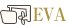
<style>
.page{position:relative;width:69px;height:27px;background:#ffffff}
.page>*{position:absolute;margin:0}
.t1{font:18px "RyuminPro-ExBold";letter-spacing:-0.08em;color:#ae9442;scale:0.9 1}
</style>
<div class="page">
<p class="t1" style="left:33px;top:7px;width:34px;height:15px">EVA</p>
</div>
